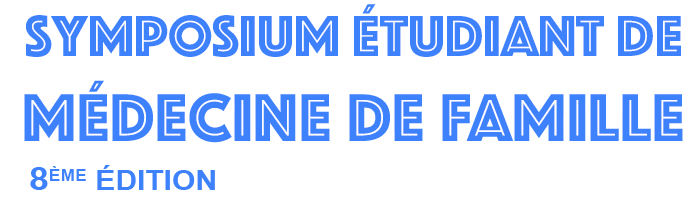
<style>
.page{position:relative;width:699px;height:212px;background:#ffffff}
.page>*{position:absolute;margin:0}
.t1{font:60px "Phosphate-Inline";color:#3e81fd}
.t2{font:70px "Phosphate-Inline";letter-spacing:0.011em;color:#3e81fd}
.t3{font:60px "Phosphate-Inline";color:#164fb5}
.t4{font:27px "Arial-BoldMT";color:#3e81fd;text-transform:uppercase;scale:1.11 1}
.t5{font:32.4px "Arial-BoldMT";color:#3e81fd;text-transform:uppercase;scale:1.11 1}
</style>
<div class="page">
<p class="t1" style="left:26px;top:4px;width:655px;height:53px">Symposium Étudiant de</p>
<p class="t2" style="left:24px;top:80px;width:659px;height:63px"><span class="t3"><br></span>Médecine DE FAMILLE</p>
<p class="t4" style="left:30px;top:165px;width:185px;height:25px"><span class="t5">8</span>ème ÉDition</p>
</div>
